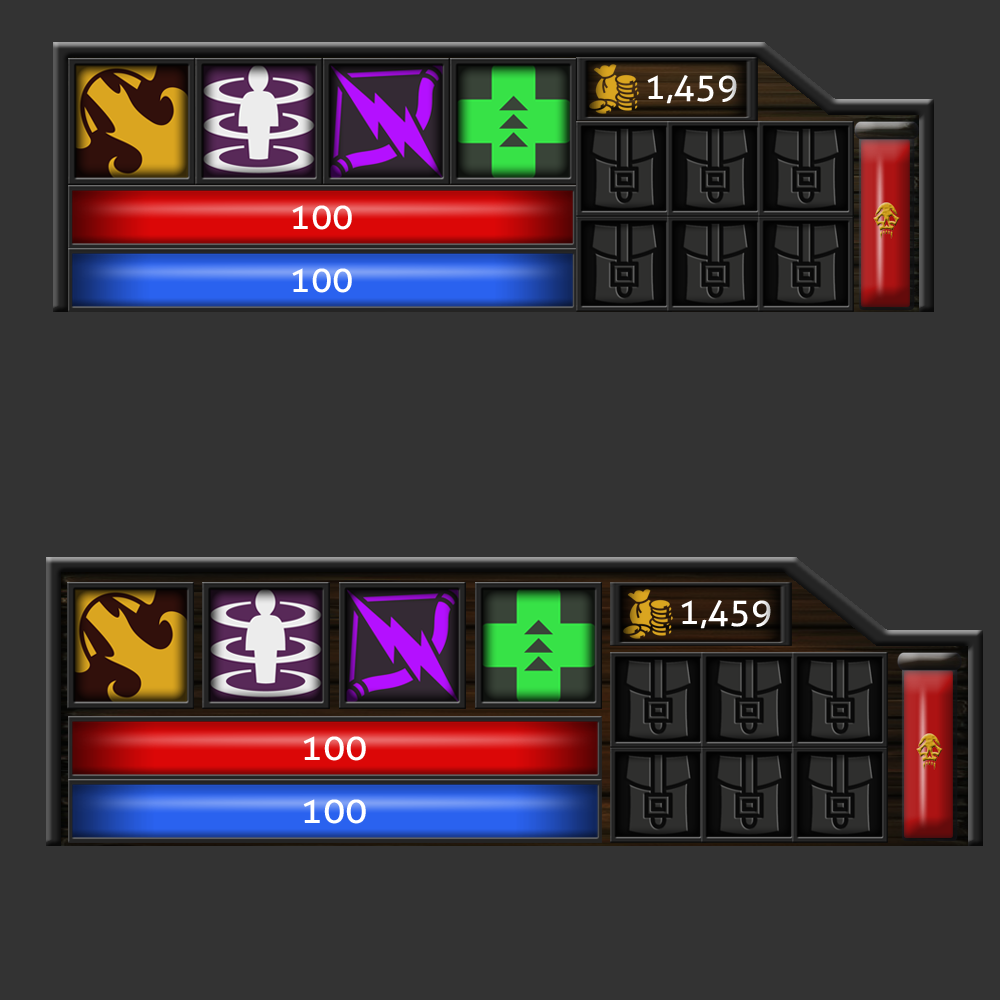
<style>
.page{position:relative;width:1000px;height:1000px;background:#333333}
.page>*{position:absolute;margin:0}
.t1{font:36px "Aller";color:#ffffff}
.t2{font:36px/63px "Aller";color:#ffffff}
.t3{font:36px/63px "Aller";color:#ffffff;scale:1.04 1}
</style>
<div class="page">
<p class="t1" style="left:647px;top:75px;width:90px;height:29px">1,459</p>
<p class="t2" style="left:292px;top:205px;width:60px;height:88px;text-align:center">100<br>100</p>
<p class="t1" style="left:681px;top:600px;width:90px;height:29px">1,459</p>
<p class="t3" style="left:303px;top:736px;width:63px;height:88px;text-align:center">100<br>100</p>
</div>
